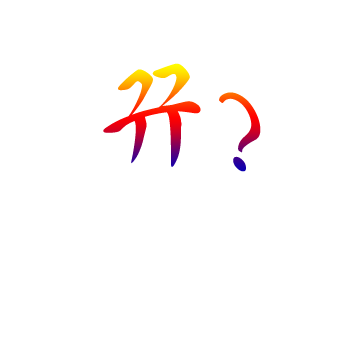
<style>
.page{position:relative;width:354px;height:354px;background:#ffffff}
.page>*{position:absolute;margin:0}
.t1{font:125px "JCkg"}
</style>
<div class="page">
<p class="t1" style="left:103px;top:63px;width:158px;height:109px">뀨?</p>
</div>
